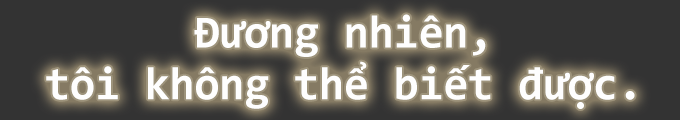
<style>
.page{position:relative;width:680px;height:120px;background:#333333}
.page>*{position:absolute;margin:0}
.t1{font:46.2px/44.2px "Consolas-Bold";letter-spacing:-0.01em;color:#fefefe}
</style>
<div class="page">
<p class="t1" style="left:46px;top:14px;width:589px;height:95px;text-align:center">Đương nhiên,<br>tôi không thể biết được.</p>
</div>
